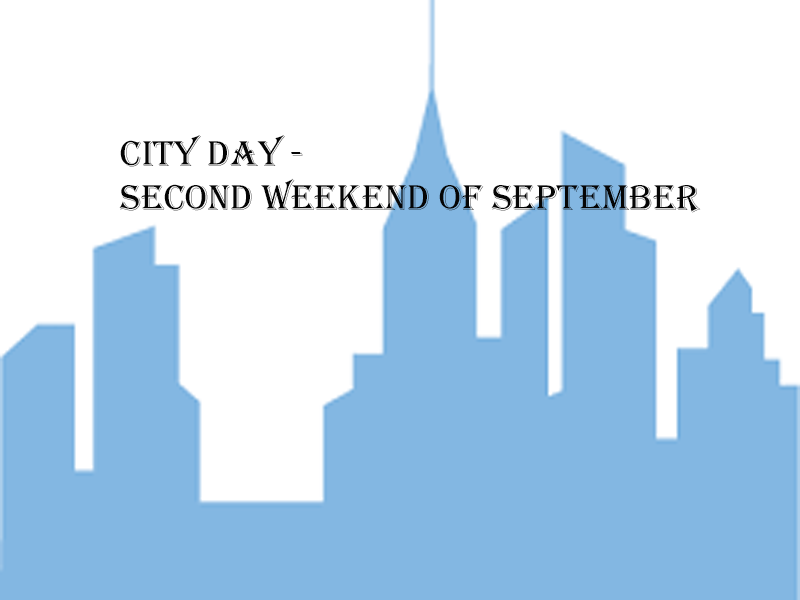
<style>
.page{position:relative;width:800px;height:600px;background:#ffffff}
.page>*{position:absolute;margin:0}
.t1{font:37px "Algerian";color:#050505}
</style>
<div class="page">
<p class="t1" style="left:119px;top:135px;width:582px;height:78px">City Day - <br>second weekend of September</p>
</div>
